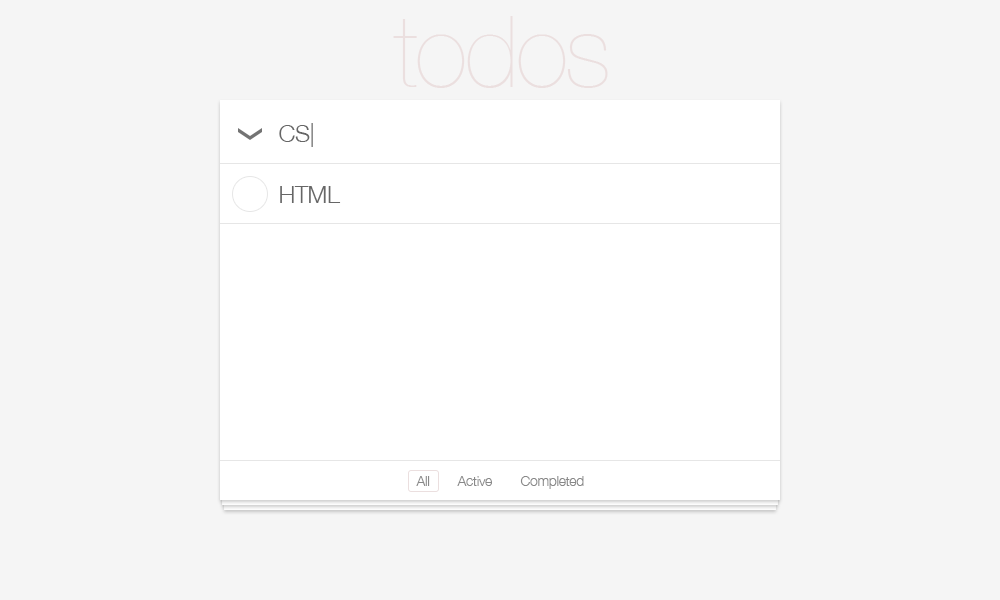
<style>
.page{position:relative;width:1000px;height:600px;background:#f5f5f5}
.page>*{position:absolute;margin:0}
.t1{font:100px "HelveticaNeue-UltraLight";letter-spacing:-0.025em;color:#ebdfdf}
.t2{font:24px "HelveticaNeue-Light";letter-spacing:-0.025em;color:#666666}
.t3{font:14px "HelveticaNeue-Light";letter-spacing:-0.025em;color:#888888}
</style>
<div class="page">
<p class="t1" style="left:393px;top:16px;width:215px;height:72px">todos</p>
<p class="t2" style="left:279px;top:123px;width:34px;height:24px">CS|</p>
<p class="t2" style="left:280px;top:186px;width:61px;height:17px">HTML</p>
<p class="t3" style="left:416px;top:476px;width:14px;height:10px">All</p>
<p class="t3" style="left:457px;top:476px;width:35px;height:10px">Active</p>
<p class="t3" style="left:520px;top:476px;width:64px;height:13px">Completed</p>
</div>
